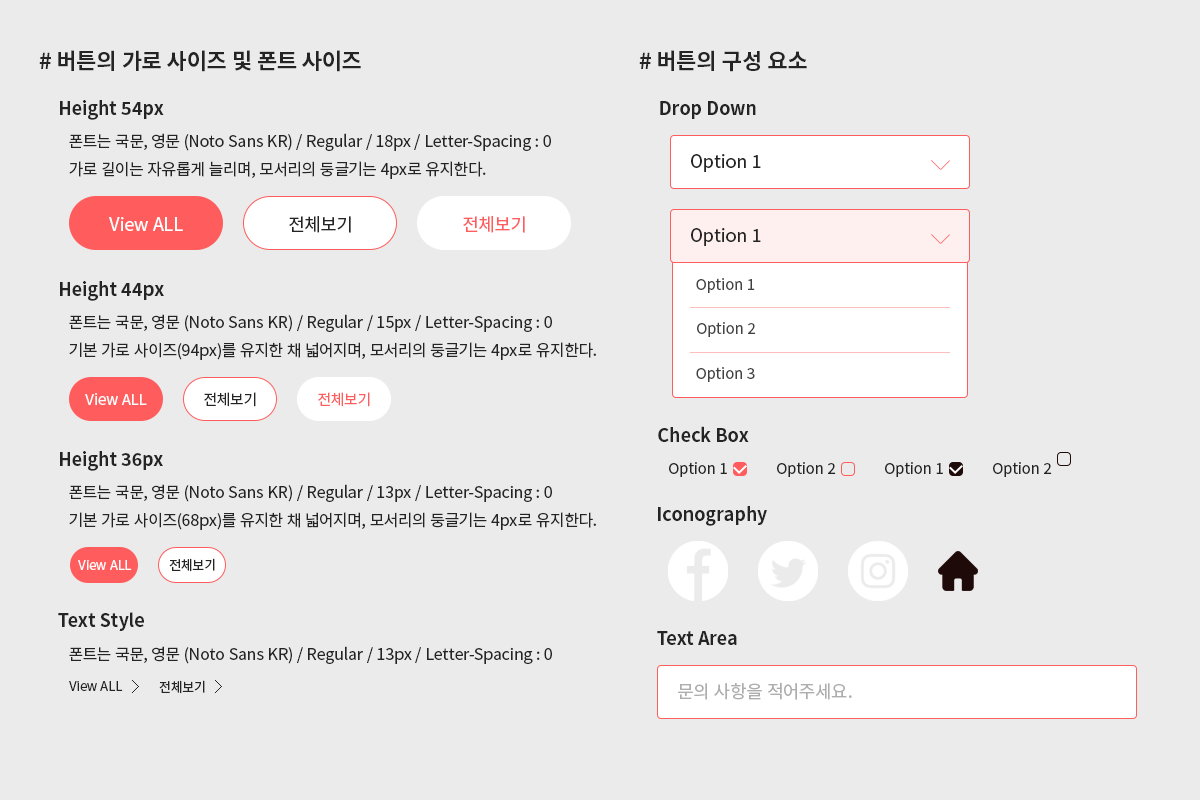
<style>
.page{position:relative;width:1200px;height:800px;background:#ebebeb}
.page>*{position:absolute;margin:0}
.t1{font:22px "NotoSansKR-Bold";color:#242424}
.t2{font:18px "NotoSansKR-Bold";color:#242424}
.t3{font:16px/28px "NotoSansKR-Regular";color:#242424}
.t4{font:18px "NotoSansKR-Regular";color:#242424}
.t5{font:18px "NotoSansKR-Regular";color:#fefefe}
.t6{font:18px "NotoSansKR-Regular";color:#ff5d5d}
.t7{font:15px "NotoSansKR-Regular";color:#424242}
.t8{font:15px "NotoSansKR-Regular";color:#fefefe}
.t9{font:15px "NotoSansKR-Regular";color:#242424}
.t10{font:15px "NotoSansKR-Regular";color:#ff5d5d}
.t11{font:13px "NotoSansKR-Regular";color:#242424}
.t12{font:13px "NotoSansKR-Regular";color:#fefefe}
.t13{font:16px "NotoSansKR-Regular";color:#242424}
.t14{font:18px "NotoSansKR-Regular";color:#adadad}
</style>
<div class="page">
<p class="t1" style="left:39px;top:50px;width:322px;height:22px"># 버튼의 가로 사이즈 및 폰트 사이즈</p>
<p class="t1" style="left:639px;top:50px;width:168px;height:22px"># 버튼의 구성 요소</p>
<p class="t2" style="left:60px;top:100px;width:104px;height:20px">Height 54px</p>
<p class="t2" style="left:660px;top:101px;width:96px;height:18px">Drop Down</p>
<p class="t3" style="left:69px;top:133px;width:482px;height:46px">폰트는 국문, 영문 (Noto Sans KR) / Regular / 18px / Letter-Spacing : 0<br>가로 길이는 자유롭게 늘리며, 모서리의 둥글기는 4px로 유지한다.</p>
<p class="t4" style="left:691px;top:154px;width:70px;height:18px">Option 1</p>
<p class="t5" style="left:109px;top:217px;width:74px;height:14px">View ALL</p>
<p class="t4" style="left:289px;top:216px;width:62px;height:17px">전체보기</p>
<p class="t6" style="left:463px;top:216px;width:62px;height:17px">전체보기</p>
<p class="t4" style="left:691px;top:228px;width:70px;height:18px">Option 1</p>
<p class="t2" style="left:60px;top:281px;width:104px;height:20px">Height 44px</p>
<p class="t7" style="left:696px;top:278px;width:59px;height:15px">Option 1</p>
<p class="t3" style="left:69px;top:314px;width:527px;height:46px">폰트는 국문, 영문 (Noto Sans KR) / Regular / 15px / Letter-Spacing : 0<br>기본 가로 사이즈(94px)를 유지한 채 넓어지며, 모서리의 둥글기는 4px로 유지한다.</p>
<p class="t7" style="left:697px;top:322px;width:59px;height:15px">Option 2</p>
<p class="t7" style="left:696px;top:367px;width:59px;height:15px">Option 3</p>
<p class="t8" style="left:85px;top:393px;width:62px;height:12px">View ALL</p>
<p class="t9" style="left:204px;top:392px;width:52px;height:15px">전체보기</p>
<p class="t10" style="left:318px;top:392px;width:52px;height:15px">전체보기</p>
<p class="t2" style="left:658px;top:426px;width:91px;height:16px">Check Box</p>
<p class="t2" style="left:60px;top:451px;width:103px;height:20px">Height 36px</p>
<p class="t9" style="left:669px;top:462px;width:58px;height:15px">Option 1</p>
<p class="t9" style="left:777px;top:462px;width:59px;height:15px">Option 2</p>
<p class="t9" style="left:885px;top:462px;width:58px;height:15px">Option 1</p>
<p class="t9" style="left:993px;top:462px;width:59px;height:15px">Option 2</p>
<p class="t3" style="left:69px;top:484px;width:527px;height:46px">폰트는 국문, 영문 (Noto Sans KR) / Regular / 13px / Letter-Spacing : 0<br>기본 가로 사이즈(68px)를 유지한 채 넓어지며, 모서리의 둥글기는 4px로 유지한다.</p>
<p class="t2" style="left:658px;top:506px;width:109px;height:20px">Iconography</p>
<p class="t11" style="left:169px;top:558px;width:46px;height:14px">전체보기</p>
<p class="t12" style="left:78px;top:560px;width:54px;height:10px">View ALL</p>
<p class="t2" style="left:58px;top:612px;width:86px;height:19px">Text Style</p>
<p class="t2" style="left:657px;top:631px;width:80px;height:14px">Text Area</p>
<p class="t13" style="left:69px;top:646px;width:483px;height:18px">폰트는 국문, 영문 (Noto Sans KR) / Regular / 13px / Letter-Spacing : 0</p>
<p class="t11" style="left:69px;top:681px;width:54px;height:10px">View ALL</p>
<p class="t11" style="left:159px;top:680px;width:46px;height:14px">전체보기</p>
<p class="t14" style="left:678px;top:682px;width:174px;height:18px">문의 사항을 적어주세요.</p>
</div>
